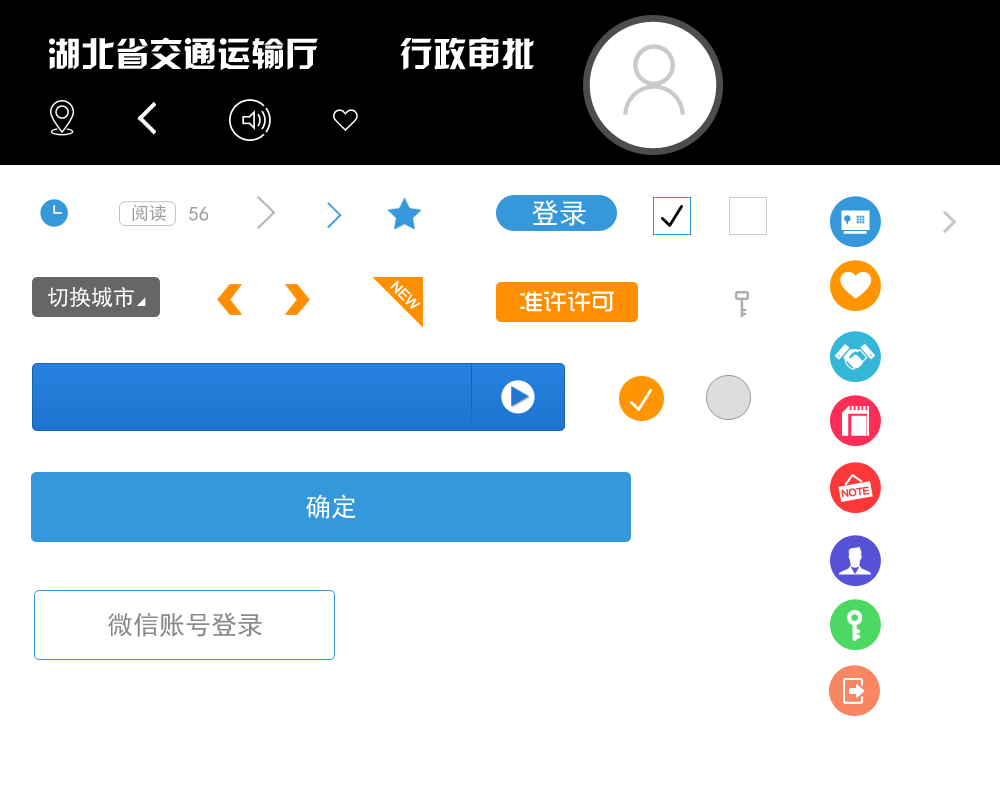
<style>
.page{position:relative;width:1000px;height:797px;background:#ffffff}
.page>*{position:absolute;margin:0}
.t1{font:34px "HYk2gj";color:#ffffff}
.t2{font:18px "SimHei";color:#9c9c9c}
.t3{font:20px "SimHei";color:#9c9c9c}
.t4{font:28px "SimHei";color:#ffffff}
.t5{font:14px "ArialMT";color:#ffffff;font-weight:bold}
.t6{font:22px "SimHei";color:#ffffff}
.t7{font:24px "TRENDS";color:#ffffff}
.t8{font:9px "FZLTZHK--GBK1-0";letter-spacing:-0.06em;color:#fe3839;font-weight:bold}
.t9{font:26px "SimHei";color:#ffffff}
.t10{font:26px "SimHei";color:#898989}
</style>
<div class="page">
<p class="t1" style="left:49px;top:37px;width:269px;height:33px">湖北省交通运输厅</p>
<p class="t1" style="left:400px;top:37px;width:134px;height:33px">行政审批</p>
<p class="t2" style="left:132px;top:204px;width:34px;height:18px">阅读</p>
<p class="t3" style="left:189px;top:206px;width:20px;height:15px">56</p>
<p class="t4" style="left:532px;top:200px;width:54px;height:26px">登录</p>
<p class="t5" style="left:390px;top:280px;width:31px;height:29px;rotate:45deg">NEW</p>
<p class="t6" style="left:48px;top:287px;width:86px;height:20px">切换城市</p>
<p class="t7" style="left:520px;top:291px;width:94px;height:21px">准许许可</p>
<p class="t8" style="left:841px;top:486px;width:29px;height:12px;rotate:-7deg">NOTE</p>
<p class="t9" style="left:306px;top:494px;width:50px;height:25px">确定</p>
<p class="t10" style="left:108px;top:612px;width:154px;height:25px">微信账号登录</p>
</div>
